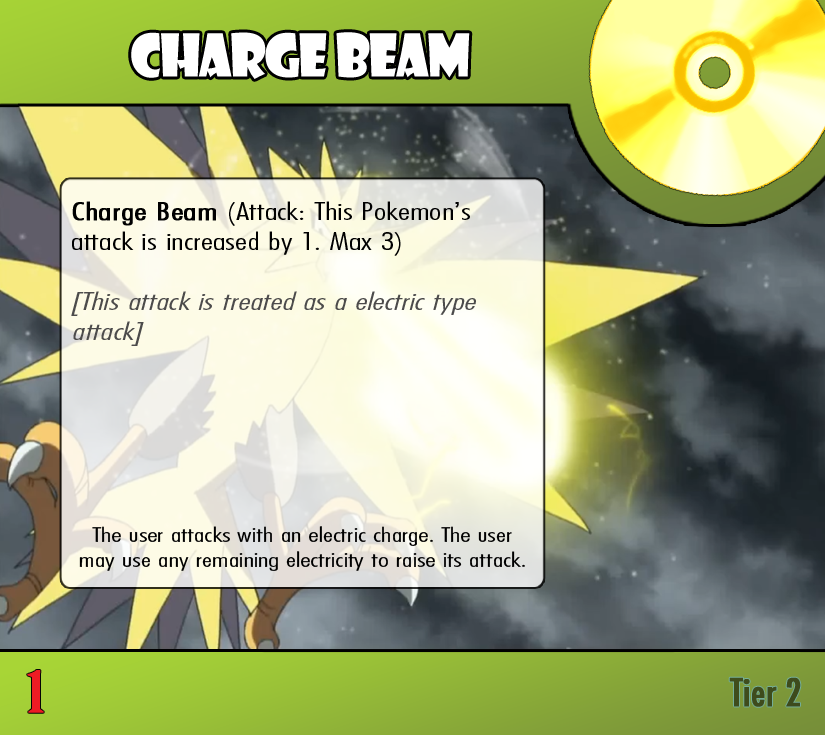
<style>
.page{position:relative;width:825px;height:735px}
.page>*{position:absolute;margin:0}
.t1{font:57.4px "ShowcardGothic-Reg";letter-spacing:-0.025em;color:#ffffff;scale:0.91 1}
.t2{font:25px "FuturaCondensedBQ-Light";color:#000000;scale:1.5 1}
.t3{font:25px "FuturaCondensedBQ-Light";color:#000000;font-weight:bold;scale:1.5 1}
.t4{font:25px "FuturaCondensedBQ-Light";color:#4c4b4b;font-style:italic;scale:1.5 1}
.t5{font:20.8px "FuturaCondensedBQ-Light";color:#000000;scale:1.5 1}
.t6{font:55.6px "BirchStd";color:#ed1c24;font-weight:bold;scale:1.5 1}
.t7{font:37.5px "Futura-Condensed-Normal";color:#3e4c1c;font-weight:bold}
</style>
<div class="page">
<p class="t1" style="left:131px;top:32px;width:339px;height:47px">Charge Beam</p>
<p class="t2" style="left:71px;top:201px;width:405px;height:145px"><span class="t3">Charge Beam </span>(Attack: This Pokemon’s attack is increased by 1. Max 3)<br><br><span class="t4">[This attack is treated as a electric type attack]</span></p>
<p class="t5" style="left:79px;top:526px;width:446px;height:45px;text-align:center">The user attacks with an electric charge. The user may use any remaining electricity to raise its attack.</p>
<p class="t6" style="left:27px;top:670px;width:17px;height:43px">1</p>
<p class="t7" style="left:729px;top:677px;width:72px;height:30px">Tier 2</p>
</div>
